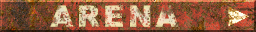
<style>
.page{position:relative;width:256px;height:32px}
.page>*{position:absolute;margin:0}
.t1{font:29.3px "Arial-Black";letter-spacing:0.12em;text-transform:uppercase}
</style>
<div class="page">
<p class="t1" style="left:50px;top:5px;width:129px;height:22px">arena</p>
</div>
